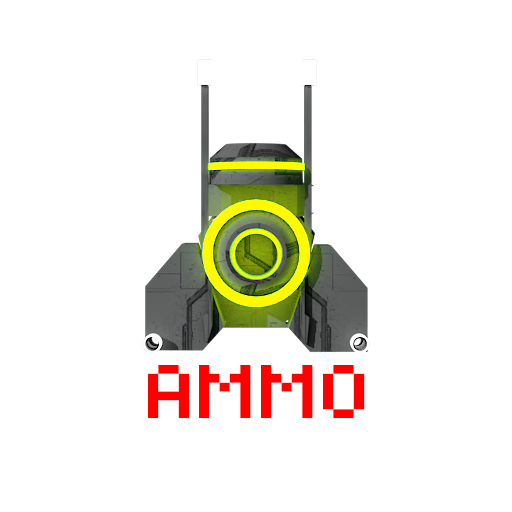
<style>
.page{position:relative;width:512px;height:512px;background:#ffffff}
.page>*{position:absolute;margin:0}
.t1{font:44.2px "Pixeled";color:#ff0000;scale:1.16 1}
</style>
<div class="page">
<p class="t1" style="left:148px;top:365px;width:217px;height:53px">AMMO</p>
</div>
